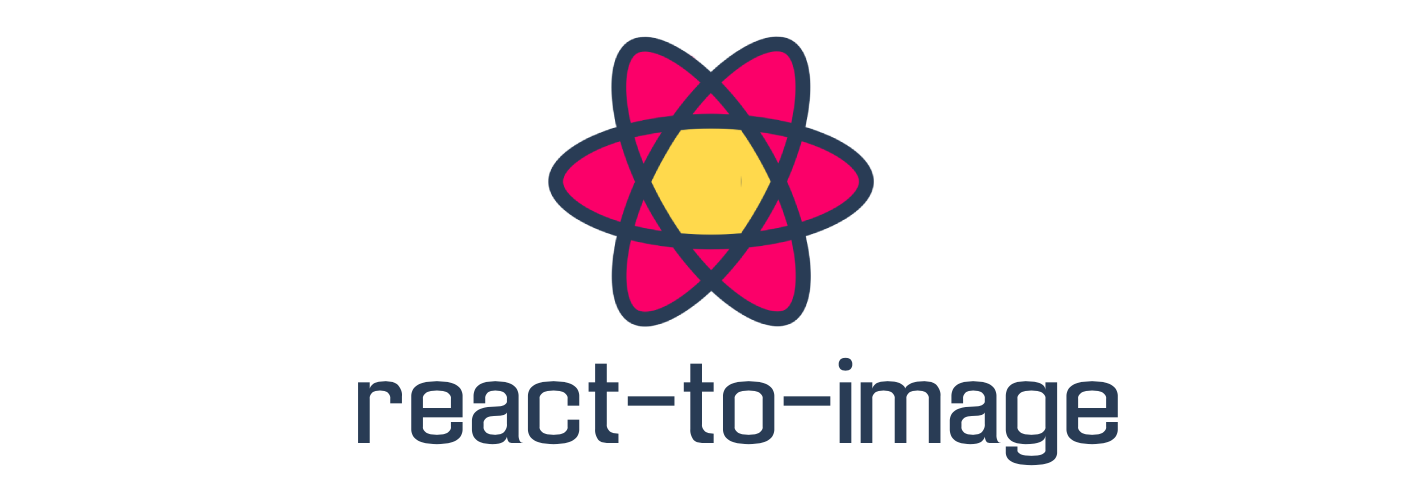
<style>
.page{position:relative;width:1420px;height:503px;background:#ffffff}
.page>*{position:absolute;margin:0}
.t1{font:112px "Enigmatic";color:#293c55}
</style>
<div class="page">
<p class="t1" style="left:358px;top:357px;width:760px;height:109px">react-to-image</p>
</div>
